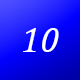
<style>
.page{position:relative;width:80px;height:80px}
.page>*{position:absolute;margin:0}
.t1{font:36px "Cambria-Italic";color:#ffffff}
</style>
<div class="page">
<p class="t1" style="left:23px;top:28px;width:36px;height:24px">10</p>
</div>
